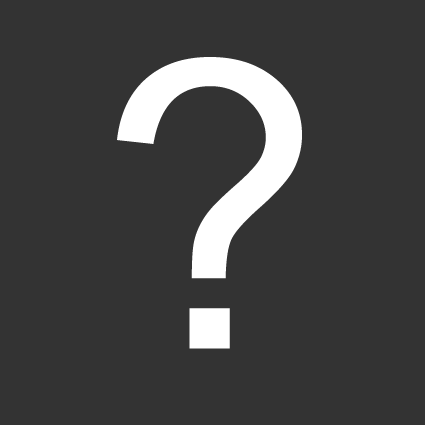
<style>
.page{position:relative;width:425px;height:425px;background:#333333}
.page>*{position:absolute;margin:0}
.t1{font:400px "ArialUnicodeMS";color:#ffffff}
</style>
<div class="page">
<p class="t1" style="left:117px;top:57px;width:185px;height:292px">?</p>
</div>
